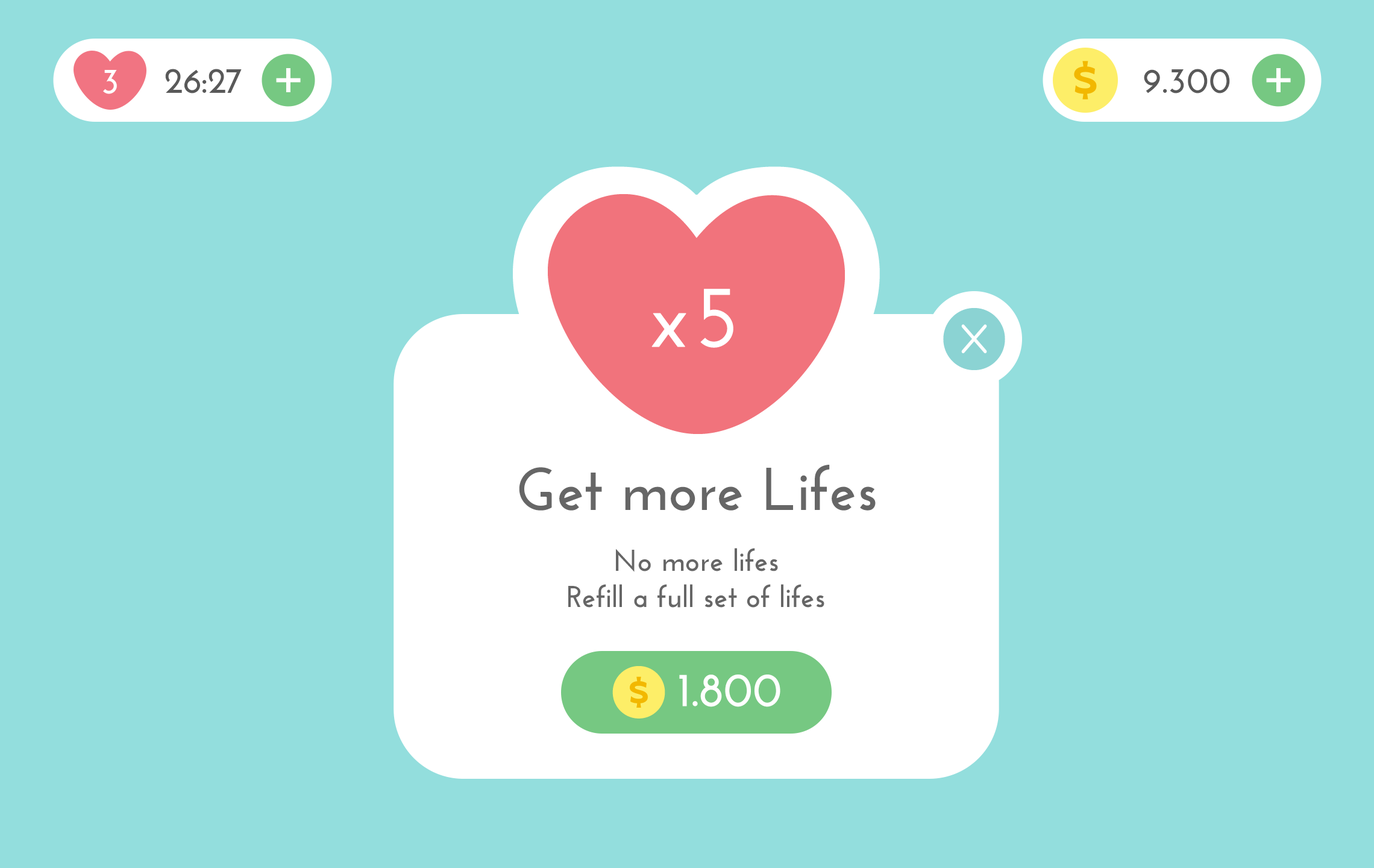
<style>
.page{position:relative;width:1374px;height:868px;background:#93dedd}
.page>*{position:absolute;margin:0}
.t1{font:36.2px "JosefinSans-Bold";color:#ffffff}
.t2{font:36.2px "JosefinSans-Bold";color:#595959}
.t3{font:88.2px "JosefinSans-SemiBold";color:#ffffff;font-weight:bold}
.t4{font:60.3px "JosefinSans-Bold";color:#666666}
.t5{font:30.1px/36.2px "JosefinSans-Bold";color:#666666}
.t6{font:48px "JosefinSans-Bold";color:#ffffff}
</style>
<div class="page">
<p class="t1" style="left:103px;top:70px;width:14px;height:24px">3</p>
<p class="t2" style="left:165px;top:69px;width:77px;height:24px">26:27</p>
<p class="t2" style="left:1144px;top:69px;width:86px;height:24px">9.300</p>
<p class="t3" style="left:651px;top:289px;width:82px;height:59px">x5</p>
<p class="t4" style="left:519px;top:465px;width:357px;height:45px">Get more Lifes</p>
<p class="t5" style="left:568px;top:548px;width:256px;height:59px;text-align:center">No more lifes<br>Refill a full set of lifes</p>
<p class="t6" style="left:679px;top:674px;width:101px;height:33px">1.800</p>
</div>
